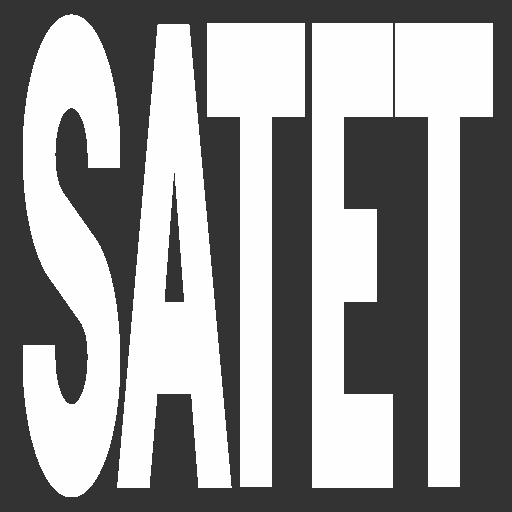
<style>
.page{position:relative;width:512px;height:512px;background:#333333}
.page>*{position:absolute;margin:0}
.t1{font:463px "NTCornelia-Regular";color:#fffefe;scale:0.35 1}
</style>
<div class="page">
<p class="t1" style="left:23px;top:14px;width:470px;height:483px">Satet</p>
</div>
